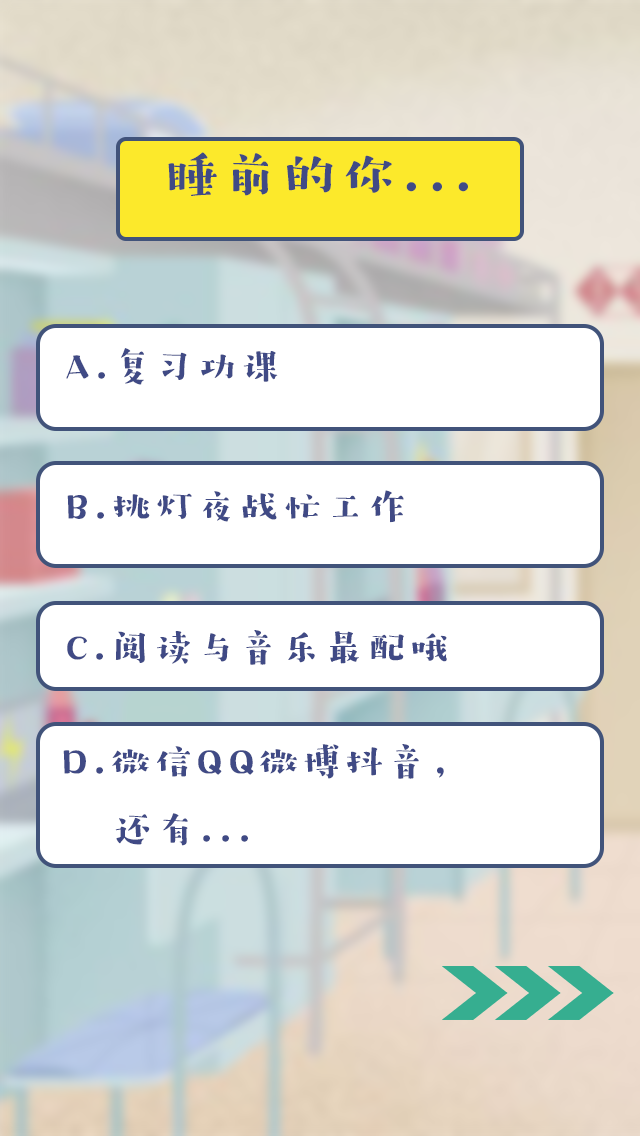
<style>
.page{position:relative;width:640px;height:1136px;background:#ffffff}
.page>*{position:absolute;margin:0}
.t1{font:53.5px "HYZiYanHuanLeSongW";letter-spacing:0.1em;color:#404a85}
.t2{font:38.9px "HYZiYanHuanLeSongW";letter-spacing:0.1em;color:#404a85}
</style>
<div class="page">
<p class="t1" style="left:168px;top:152px;width:300px;height:44px">睡前的你...</p>
<p class="t2" style="left:66px;top:348px;width:212px;height:37px">A.复习功课</p>
<p class="t2" style="left:67px;top:490px;width:337px;height:33px">B.挑灯夜战忙工作</p>
<p class="t2" style="left:67px;top:630px;width:380px;height:35px">C.阅读与音乐最配哦</p>
<p class="t2" style="left:63px;top:744px;width:381px;height:102px">D.微信QQ微博抖音，<br>   还有...</p>
</div>
